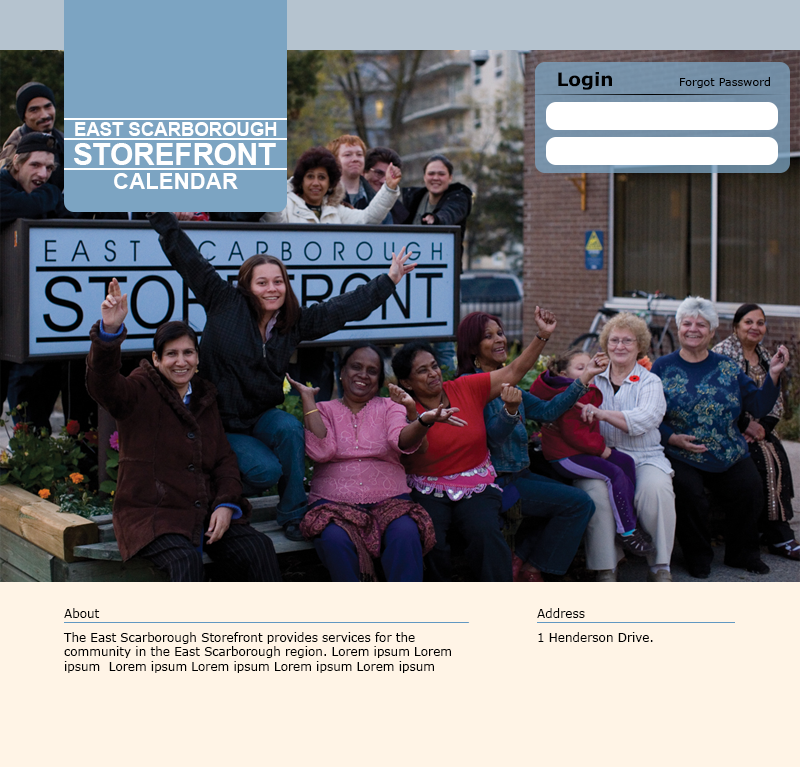
<style>
.page{position:relative;width:800px;height:767px;background:#fff4e6}
.page>*{position:absolute;margin:0}
.t1{font:18.5px "Verdana-Bold";color:#000000}
.t2{font:11.1px "Verdana";color:#000000}
.t3{font:18.5px "Arial-BoldMT";color:#ffffff}
.t4{font:29.6px "Arial-BoldMT";color:#ffffff}
.t5{font:22.3px "Arial-BoldMT";color:#ffffff}
.t6{font:12px "Verdana";color:#000000}
</style>
<div class="page">
<p class="t1" style="left:558px;top:72px;width:54px;height:18px">Login</p>
<p class="t2" style="left:680px;top:77px;width:90px;height:11px">Forgot Password</p>
<p class="t3" style="left:75px;top:122px;width:202px;height:14px">EAST SCARBOROUGH</p>
<p class="t4" style="left:74px;top:143px;width:202px;height:22px">STOREFRONT</p>
<p class="t5" style="left:114px;top:173px;width:124px;height:16px">CALENDAR</p>
<p class="t6" style="left:64px;top:608px;width:36px;height:10px">About</p>
<p class="t6" style="left:537px;top:608px;width:48px;height:10px">Address</p>
<p class="t6" style="left:63px;top:632px;width:388px;height:41px">The East Scarborough Storefront provides services for the <br>community in the East Scarborough region. Lorem ipsum Lorem <br>ipsum  Lorem ipsum Lorem ipsum Lorem ipsum Lorem ipsum</p>
<p class="t6" style="left:538px;top:632px;width:115px;height:10px">1 Henderson Drive.</p>
</div>
